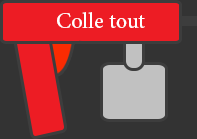
<style>
.page{position:relative;width:197px;height:139px;background:#333333}
.page>*{position:absolute;margin:0}
.t1{font:30px "AdobeArabic-Regular";color:#ffffff}
</style>
<div class="page">
<p class="t1" style="left:57px;top:12px;width:88px;height:16px">Colle tout</p>
</div>
